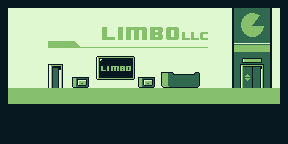
<style>
.page{position:relative;width:288px;height:144px;background:#071821}
.page>*{position:absolute;margin:0}
.t1{font:33px "HWTMardell";color:#86c06c;text-transform:uppercase}
.t2{font:16px "8BITWONDERNominal";color:#86c06c;text-transform:uppercase}
.t3{font:9px "8BITWONDERNominal";color:#86c06c;text-transform:uppercase}
.t4{font:6px "8BITWONDERNominal";color:#86c06c;text-transform:uppercase}
</style>
<div class="page">
<p class="t1" style="left:241px;top:13px;width:23px;height:24px">G</p>
<p class="t2" style="left:102px;top:27px;width:106px;height:13px">limbo<span class="t3">llc</span></p>
<p class="t4" style="left:101px;top:66px;width:30px;height:5px">limbo</p>
</div>
